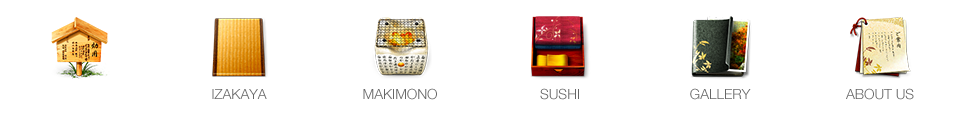
<style>
.page{position:relative;width:960px;height:115px;background:#ffffff}
.page>*{position:absolute;margin:0}
.t1{font:14px "HelveticaNeueLTPro-Lt";color:#666666;text-transform:uppercase}
</style>
<div class="page">
<p class="t1" style="left:212px;top:89px;width:55px;height:10px">IZAKAYA</p>
<p class="t1" style="left:363px;top:88px;width:74px;height:12px">MAKIMONO</p>
<p class="t1" style="left:540px;top:88px;width:39px;height:12px">Sushi</p>
<p class="t1" style="left:690px;top:88px;width:61px;height:12px">GALLERY</p>
<p class="t1" style="left:846px;top:88px;width:68px;height:12px">ABOUT US</p>
</div>
